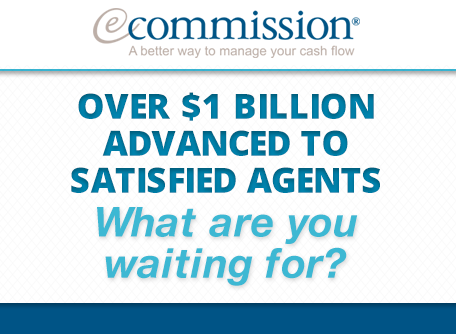
<style>
.page{position:relative;width:456px;height:334px;background:#ffffff}
.page>*{position:absolute;margin:0}
.t1{font:34.7px/37px "OpenSans-Extrabold";color:#0085b0;text-transform:uppercase}
.t2{font:41.2px/41.2px "HelveticaNeue-BoldItalic";color:#3db8d3}
</style>
<div class="page">
<p class="t1" style="left:71px;top:92px;width:309px;height:101px;text-align:center">Over $1 Billion<br>Advanced to<br>Satisfied Agents</p>
<p class="t2" style="left:97px;top:207px;width:261px;height:79px;text-align:center">What are you<br>waiting for?</p>
</div>
